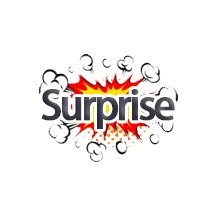
<style>
.page{position:relative;width:216px;height:216px;background:#ffffff}
.page>*{position:absolute;margin:0}
.t1{font:40px "AdobeHeitiStd-Regular";letter-spacing:-0.075em;color:#3e3e4a;font-weight:bold}
</style>
<div class="page">
<p class="t1" style="left:41px;top:89px;width:134px;height:40px">Surprise</p>
</div>
